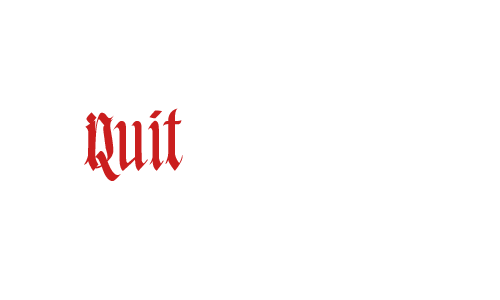
<style>
.page{position:relative;width:500px;height:300px;background:#ffffff}
.page>*{position:absolute;margin:0}
.t1{font:72px "Blacktonespersonaluse";color:#ca1e1e}
</style>
<div class="page">
<p class="t1" style="left:84px;top:108px;width:99px;height:73px">Quit</p>
</div>
